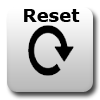
<style>
.page{position:relative;width:100px;height:100px}
.page>*{position:absolute;margin:0}
.t1{font:18px "Verdana-Bold";color:#000000}
</style>
<div class="page">
<p class="t1" style="left:24px;top:9px;width:56px;height:13px">Reset</p>
</div>
